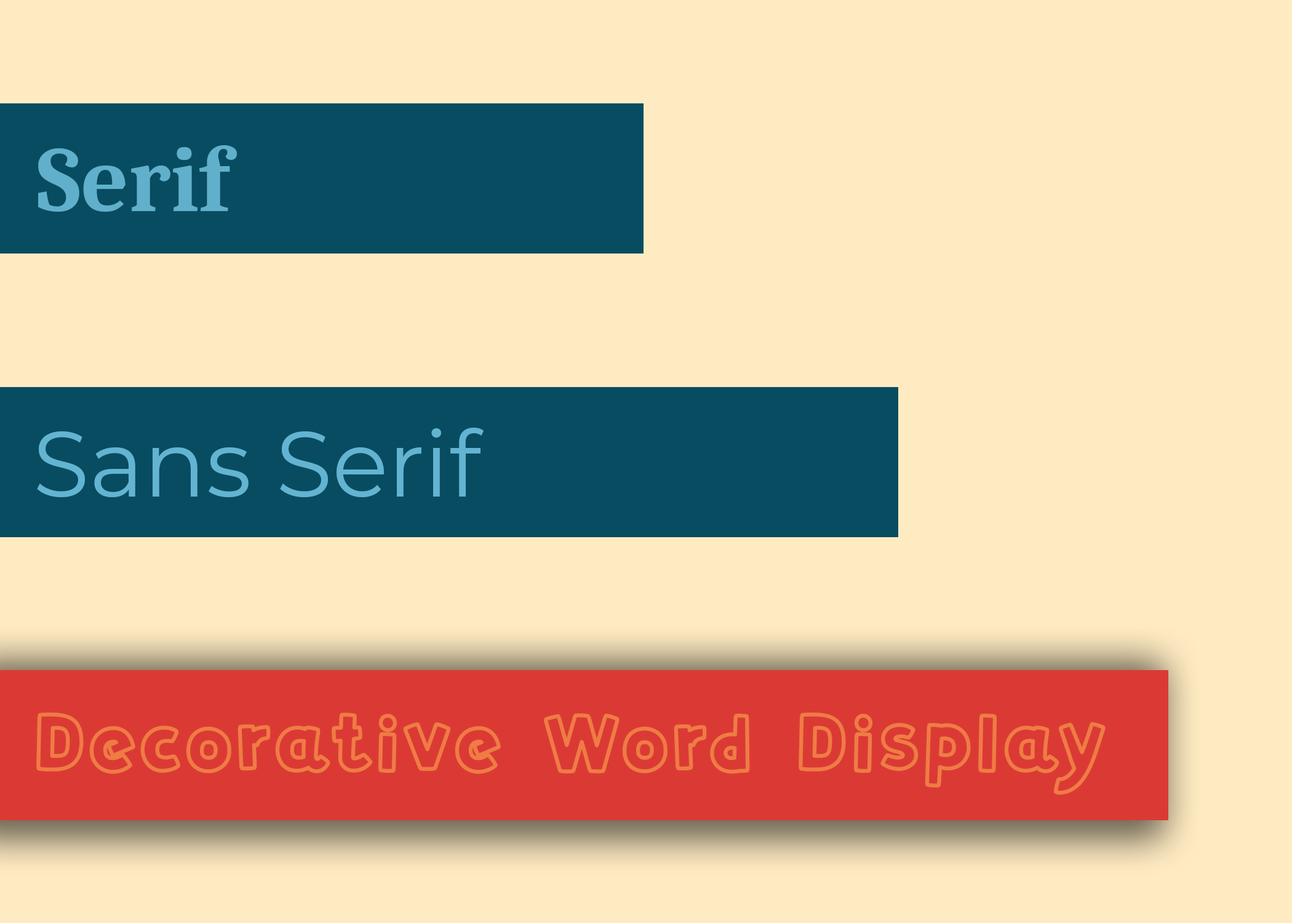
<style>
.page{position:relative;width:1292px;height:923px;background:#ffebc2}
.page>*{position:absolute;margin:0}
.t1{font:92.3px "Caladea-Bold";color:#60b0cc}
.t2{font:92.3px "Montserrat-Regular";color:#63b4d1}
.t3{font:92.3px "ZyzolOutline";color:#ef7b45}
</style>
<div class="page">
<p class="t1" style="left:38px;top:145px;width:199px;height:67px">Serif</p>
<p class="t2" style="left:37px;top:428px;width:447px;height:70px">Sans Serif</p>
<p class="t3" style="left:36px;top:712px;width:1070px;height:83px">Decorative Word Display</p>
</div>
